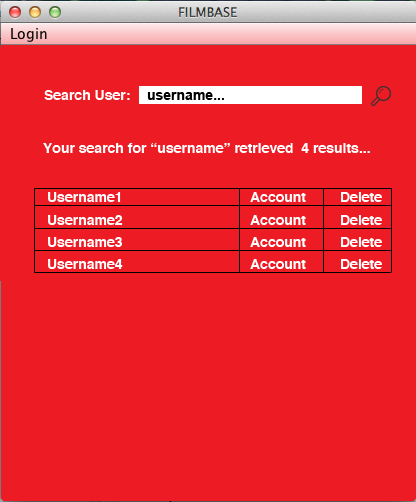
<style>
.page{position:relative;width:416px;height:502px;background:#ed1c24}
.page>*{position:absolute;margin:0}
.t1{font:14px "Helvetica-Bold";color:#ffffff}
.t2{font:14px "Arial-BoldMT";color:#000000}
</style>
<div class="page">
<p class="t1" style="left:44px;top:90px;width:86px;height:10px">Search User:</p>
<p class="t2" style="left:147px;top:92px;width:77px;height:8px">username...</p>
<p class="t1" style="left:43px;top:143px;width:327px;height:10px">Your search for “username” retrieved  4 results...</p>
<p class="t1" style="left:48px;top:192px;width:73px;height:10px">Username1</p>
<p class="t1" style="left:250px;top:192px;width:56px;height:10px">Account</p>
<p class="t1" style="left:341px;top:192px;width:41px;height:10px">Delete</p>
<p class="t1" style="left:48px;top:215px;width:75px;height:10px">Username2</p>
<p class="t1" style="left:250px;top:215px;width:56px;height:10px">Account</p>
<p class="t1" style="left:341px;top:215px;width:41px;height:10px">Delete</p>
<p class="t1" style="left:48px;top:237px;width:74px;height:10px">Username3</p>
<p class="t1" style="left:250px;top:237px;width:56px;height:10px">Account</p>
<p class="t1" style="left:341px;top:237px;width:41px;height:10px">Delete</p>
<p class="t1" style="left:48px;top:259px;width:75px;height:10px">Username4</p>
<p class="t1" style="left:250px;top:259px;width:56px;height:10px">Account</p>
<p class="t1" style="left:341px;top:259px;width:41px;height:10px">Delete</p>
</div>
